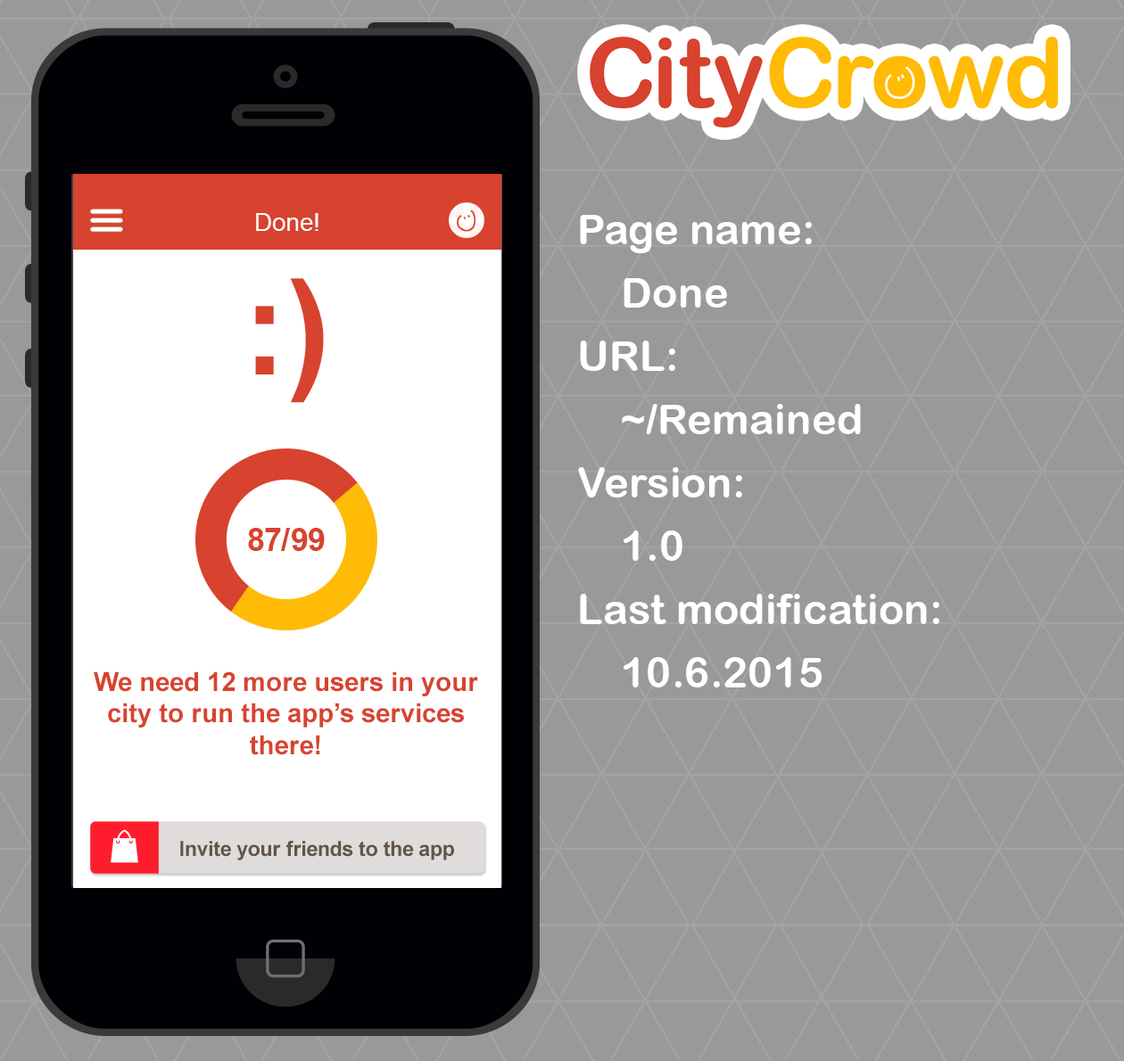
<style>
.page{position:relative;width:1124px;height:1061px;background:#999999}
.page>*{position:absolute;margin:0}
.t1{font:24.6px "ArialMT";color:#ffffff}
.t2{font:42.2px/63.3px "ArialRoundedMTBold";color:#ffffff}
.t3{font:26.4px "Arial-BoldMT";color:#d7432e}
.t4{font:131.9px/79.1px "Arial-BoldMT";color:#d7432e}
.t5{font:26.4px/79.1px "Arial-BoldMT";color:#d7432e}
.t6{font:31.7px "Arial-BoldMT";color:#d7432e}
.t7{font:20.8px "Arial-BoldMT";color:#625548}
</style>
<div class="page">
<p class="t1" style="left:256px;top:213px;width:62px;height:18px">Done!</p>
<p class="t2" style="left:578px;top:215px;width:361px;height:473px">Page name:<br>Done<br>URL:<br>~/Remained<br>Version:<br>1.0<br>Last modification:<br>10.6.2015</p>
<p class="t3" style="left:94px;top:278px;width:384px;height:477px;text-align:center"><span class="t4">:)<br></span><span class="t5"><br><br><br>We need 12 more users in your<br></span>city to run the app’s services<br>there!</p>
<p class="t6" style="left:248px;top:528px;width:77px;height:23px">87/99</p>
<p class="t7" style="left:180px;top:841px;width:274px;height:20px">Invite your friends to the app</p>
</div>
